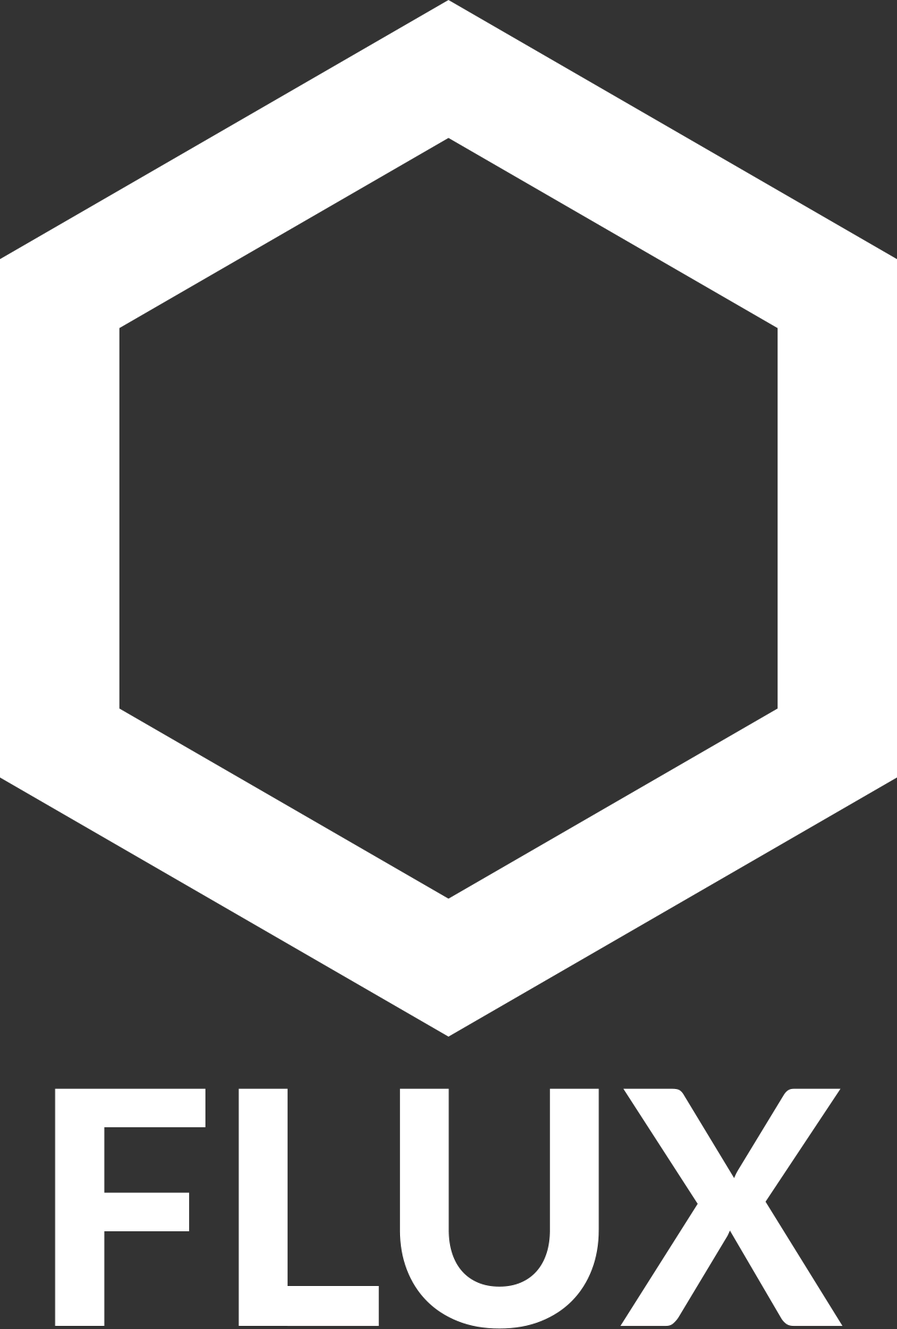
<style>
.page{position:relative;width:897px;height:1329px;background:#333333}
.page>*{position:absolute;margin:0}
.t1{font:326.8px "Lato-Heavy";color:#ffffff}
</style>
<div class="page">
<p class="t1" style="left:55px;top:1088px;width:788px;height:241px">FLUX</p>
</div>
